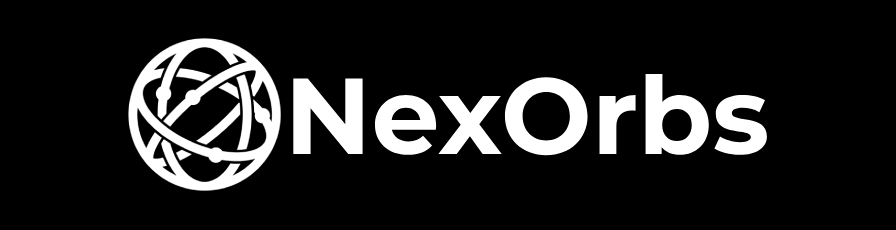
<style>
.page{position:relative;width:896px;height:230px;background:#000000}
.page>*{position:absolute;margin:0}
.t1{font:107.9px "Montserrat-Bold";color:#ffffff}
</style>
<div class="page">
<p class="t1" style="left:293px;top:74px;width:474px;height:82px">NexOrbs</p>
</div>
